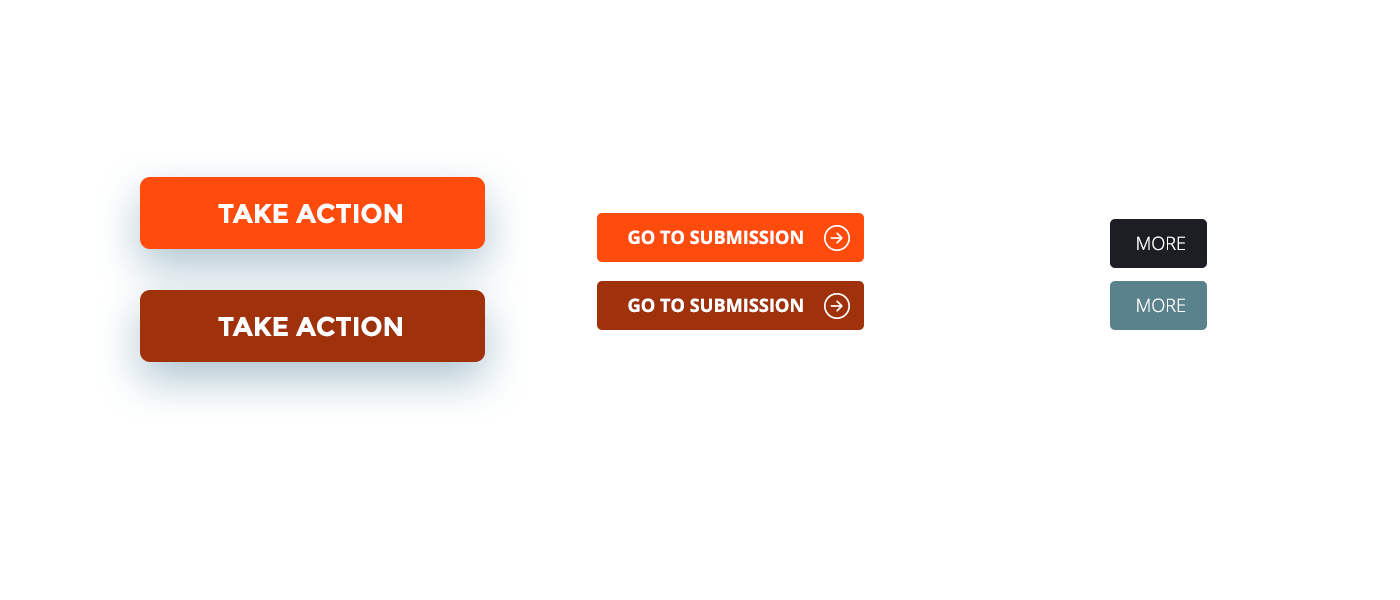
<style>
.page{position:relative;width:1400px;height:600px;background:#ffffff}
.page>*{position:absolute;margin:0}
.t1{font:26.7px "Montserrat-Bold";color:#ffffff}
.t2{font:18.2px "OpenSans-Bold";color:#ffffff}
.t3{font:18.2px "OpenSans-Light";color:#ffffff}
</style>
<div class="page">
<p class="t1" style="left:218px;top:203px;width:184px;height:21px">TAKE ACTION</p>
<p class="t2" style="left:628px;top:230px;width:175px;height:15px">GO TO SUBMISSION</p>
<p class="t3" style="left:1137px;top:236px;width:48px;height:15px">MORE</p>
<p class="t2" style="left:628px;top:298px;width:175px;height:15px">GO TO SUBMISSION</p>
<p class="t3" style="left:1137px;top:298px;width:48px;height:15px">MORE</p>
<p class="t1" style="left:218px;top:316px;width:184px;height:21px">TAKE ACTION</p>
</div>
